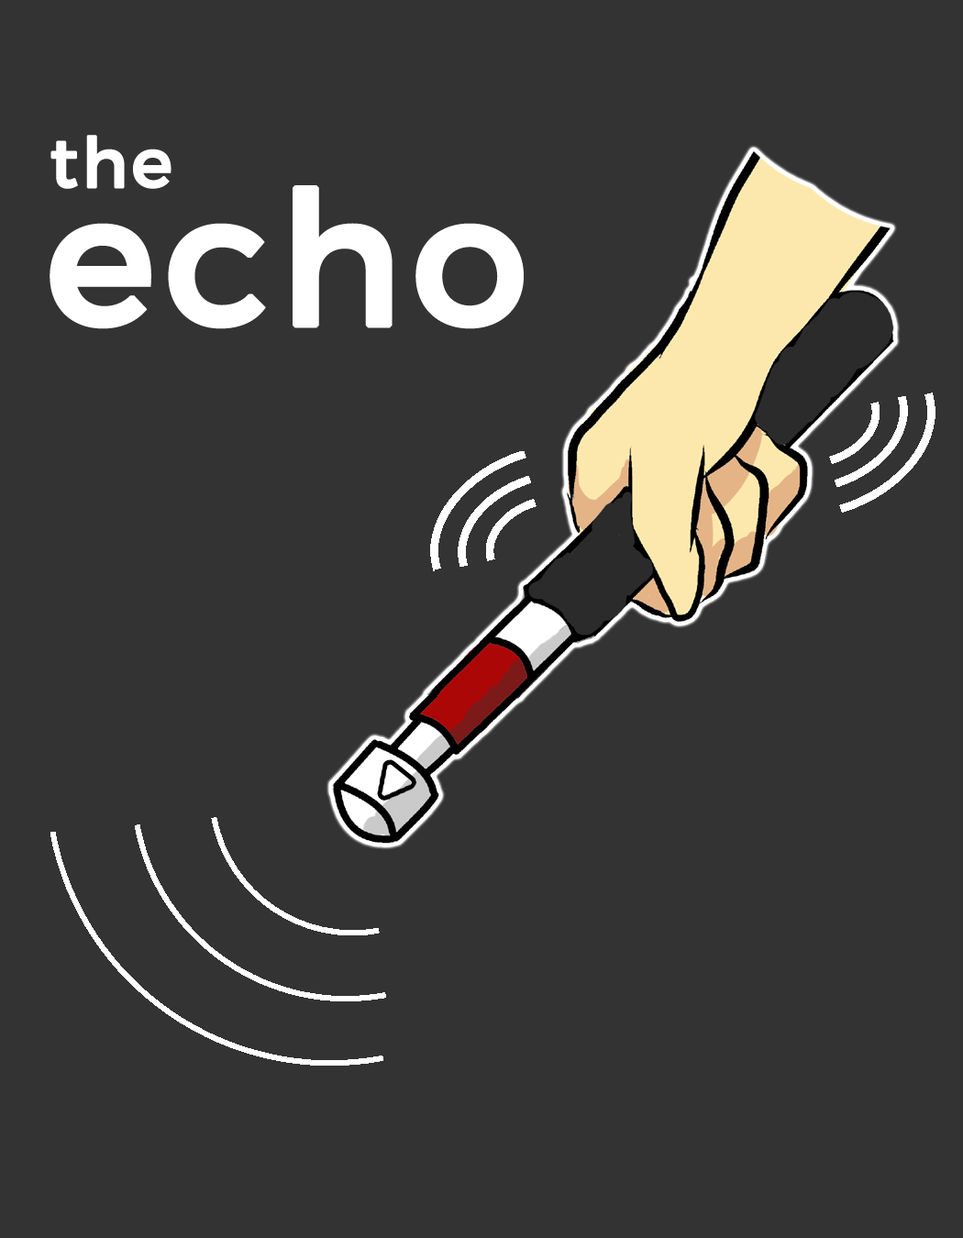
<style>
.page{position:relative;width:963px;height:1238px;background:#333333}
.page>*{position:absolute;margin:0}
.t1{font:69.2px "Montserrat-Regular";letter-spacing:0.025em;color:#ffffff;font-weight:bold}
.t2{font:185.1px "Montserrat-Regular";letter-spacing:0.025em;color:#ffffff;font-weight:bold}
</style>
<div class="page">
<p class="t1" style="left:50px;top:135px;width:122px;height:54px">the</p>
<p class="t2" style="left:50px;top:185px;width:474px;height:144px"><span class="t1"><br></span>echo</p>
</div>
